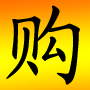
<style>
.page{position:relative;width:90px;height:90px}
.page>*{position:absolute;margin:0}
.t1{font:90px "KaiTi_GB2312";color:#000000}
</style>
<div class="page">
<p class="t1" style="left:6px;top:5px;width:74px;height:80px">购</p>
</div>
